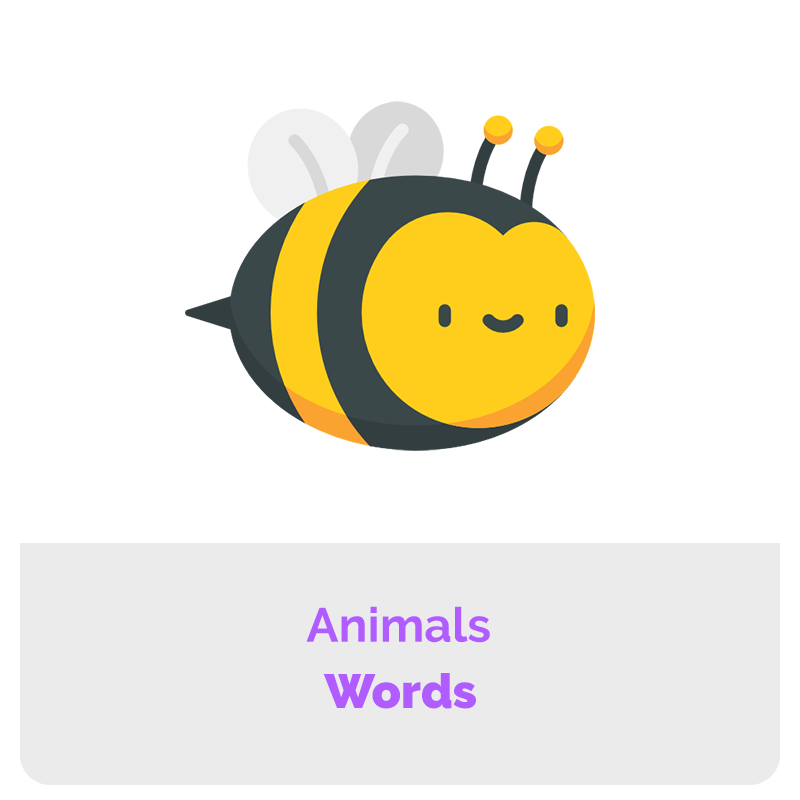
<style>
.page{position:relative;width:800px;height:800px;background:#ffffff}
.page>*{position:absolute;margin:0}
.t1{font:48px "Raleway-Bold";color:#b05cff}
.t2{font:48px "Raleway-Black";color:#b05cff}
</style>
<div class="page">
<p class="t1" style="left:306px;top:606px;width:184px;height:37px">Animals</p>
<p class="t2" style="left:323px;top:673px;width:153px;height:36px">Words</p>
</div>
